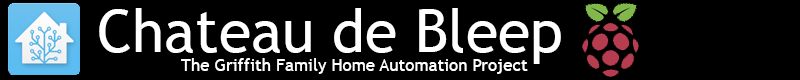
<style>
.page{position:relative;width:800px;height:80px;background:#000000}
.page>*{position:absolute;margin:0}
.t1{font:59px "TrebuchetMS";color:#ffffff}
.t2{font:17px "TrebuchetMS";color:#ffffff}
</style>
<div class="page">
<p class="t1" style="left:99px;top:8px;width:462px;height:56px">Chateau de Bleep</p>
<p class="t2" style="left:181px;top:58px;width:347px;height:16px">The Griffith Family Home Automation Project</p>
</div>
